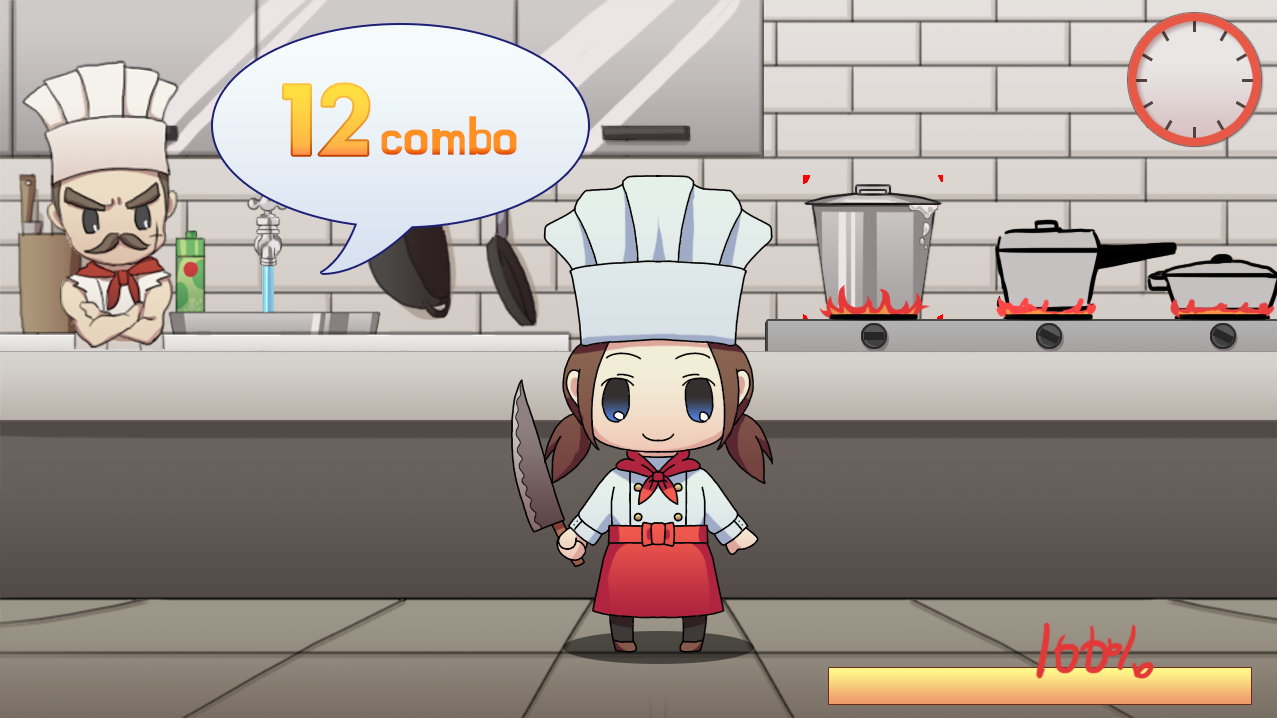
<style>
.page{position:relative;width:1277px;height:718px}
.page>*{position:absolute;margin:0}
.t1{font:95.3px "BMHANNA";color:#ffce43}
.t2{font:52.8px "BMHANNA";color:#ff9023}
</style>
<div class="page">
<p class="t1" style="left:284px;top:84px;width:85px;height:71px">12</p>
<p class="t2" style="left:381px;top:116px;width:136px;height:39px">combo</p>
</div>
